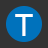
<style>
.page{position:relative;width:48px;height:48px;background:#333333}
.page>*{position:absolute;margin:0}
.t1{font:31.1px "TrebuchetMS";color:#ffffff}
</style>
<div class="page">
<p class="t1" style="left:15px;top:14px;width:18px;height:22px">T</p>
</div>
